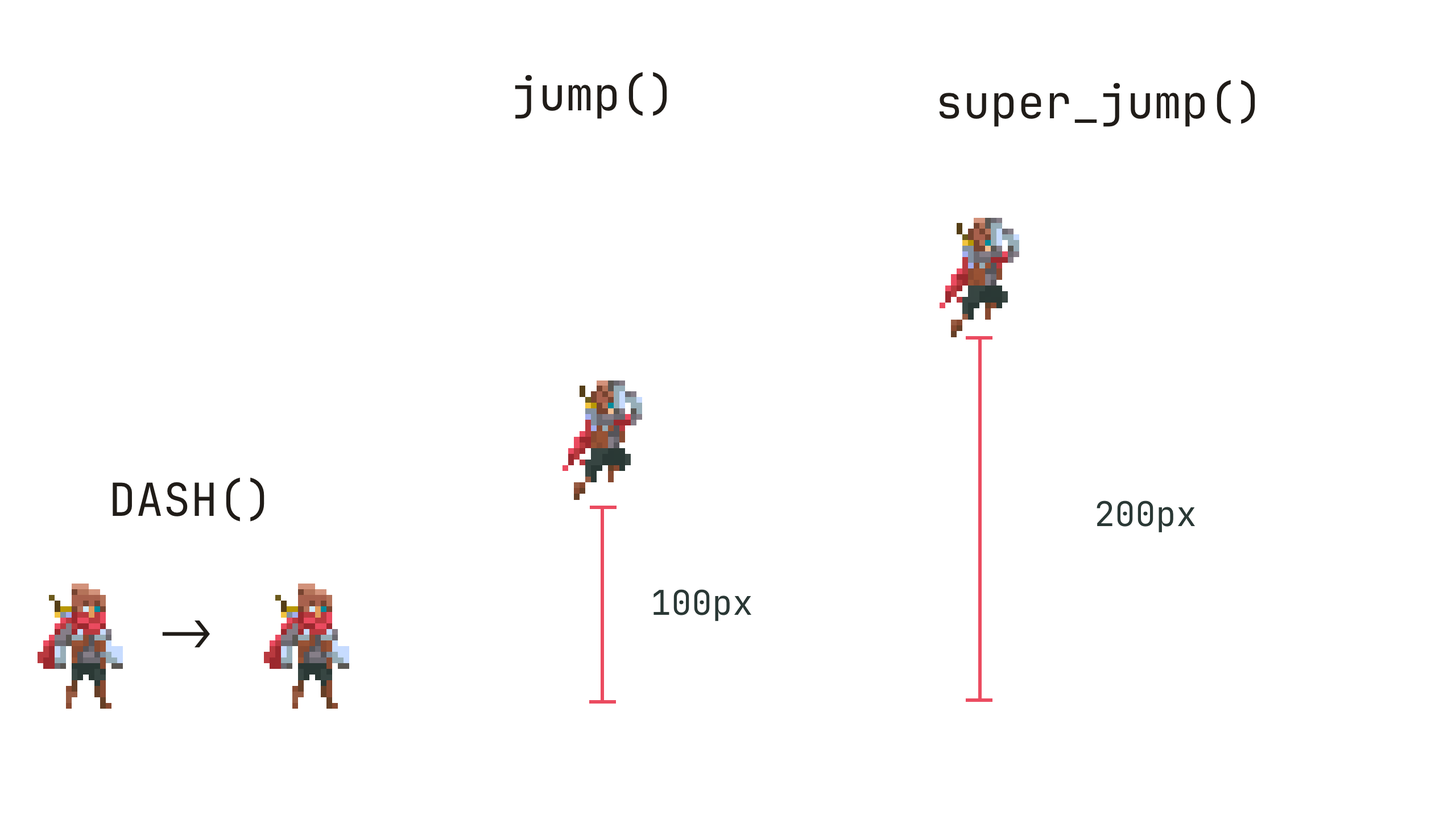
<style>
.page{position:relative;width:1456px;height:819px;background:#ffffff}
.page>*{position:absolute;margin:0}
.t1{font:45.5px "JetBrainsMono-Regular";color:#201c18}
.t2{font:34.1px "JetBrainsMono-Regular";color:#2a3835}
</style>
<div class="page">
<p class="t1" style="left:515px;top:72px;width:152px;height:47px">jump()</p>
<p class="t1" style="left:939px;top:80px;width:316px;height:47px">super_jump()</p>
<p class="t1" style="left:113px;top:477px;width:151px;height:45px">DASH()</p>
<p class="t2" style="left:1097px;top:500px;width:98px;height:32px">200px</p>
<p class="t2" style="left:653px;top:589px;width:98px;height:32px">100px</p>
<p class="t1" style="left:162px;top:620px;width:48px;height:28px">-&gt;</p>
</div>
